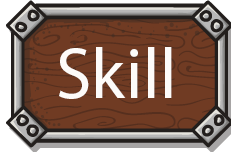
<style>
.page{position:relative;width:231px;height:152px;background:#703b23}
.page>*{position:absolute;margin:0}
.t1{font:72px "MyriadPro-Regular";color:#fdfbf9}
</style>
<div class="page">
<p class="t1" style="left:59px;top:47px;width:113px;height:52px">Skill</p>
</div>
